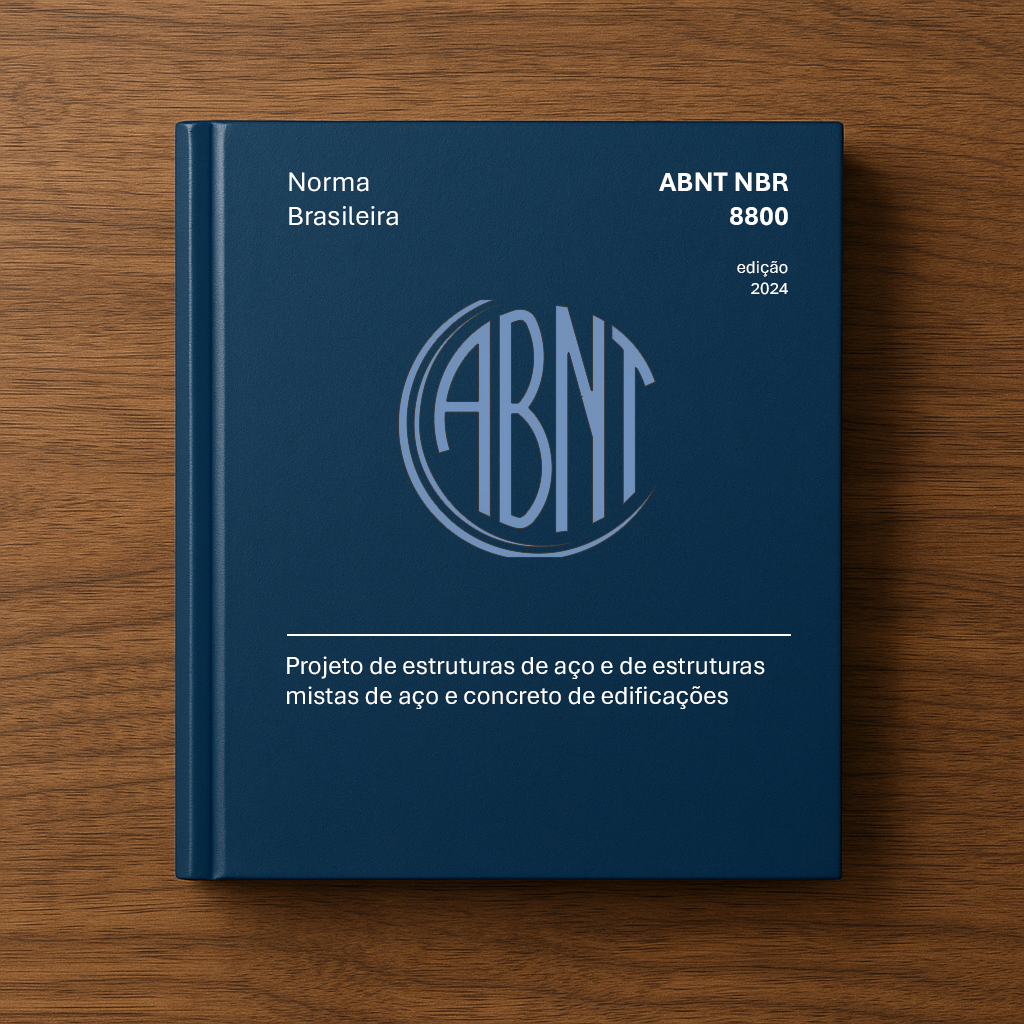
<style>
.page{position:relative;width:1024px;height:1024px}
.page>*{position:absolute;margin:0}
.t1{font:28px "Aptos";color:#ffffff}
.t2{font:28px "Aptos-Bold";color:#ffffff}
.t3{font:17.7px "Aptos";color:#ffffff}
.t4{font:25.7px "Aptos";color:#ffffff}
</style>
<div class="page">
<p class="t1" style="left:289px;top:172px;width:109px;height:54px">Norma<br>Brasileira</p>
<p class="t2" style="left:659px;top:172px;width:130px;height:54px;text-align:right">ABNT NBR<br>8800</p>
<p class="t3" style="left:737px;top:261px;width:51px;height:34px;text-align:right">edição<br>2024</p>
<p class="t4" style="left:287px;top:656px;width:478px;height:53px">Projeto de estruturas de aço e de estruturas<br>mistas de aço e concreto de edificações</p>
</div>
